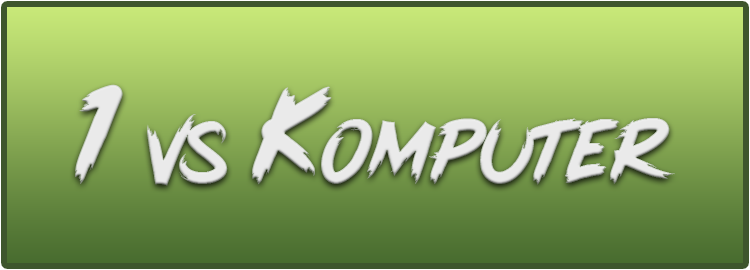
<style>
.page{position:relative;width:750px;height:270px}
.page>*{position:absolute;margin:0}
.t1{font:97.3px "PinkBlue";color:#eaeaea}
.t2{font:147.2px "PinkBlue";color:#eaeaea}
</style>
<div class="page">
<p class="t1" style="left:75px;top:84px;width:600px;height:102px"><span class="t2">1</span> vs <span class="t2">K</span>OMPuter</p>
</div>
